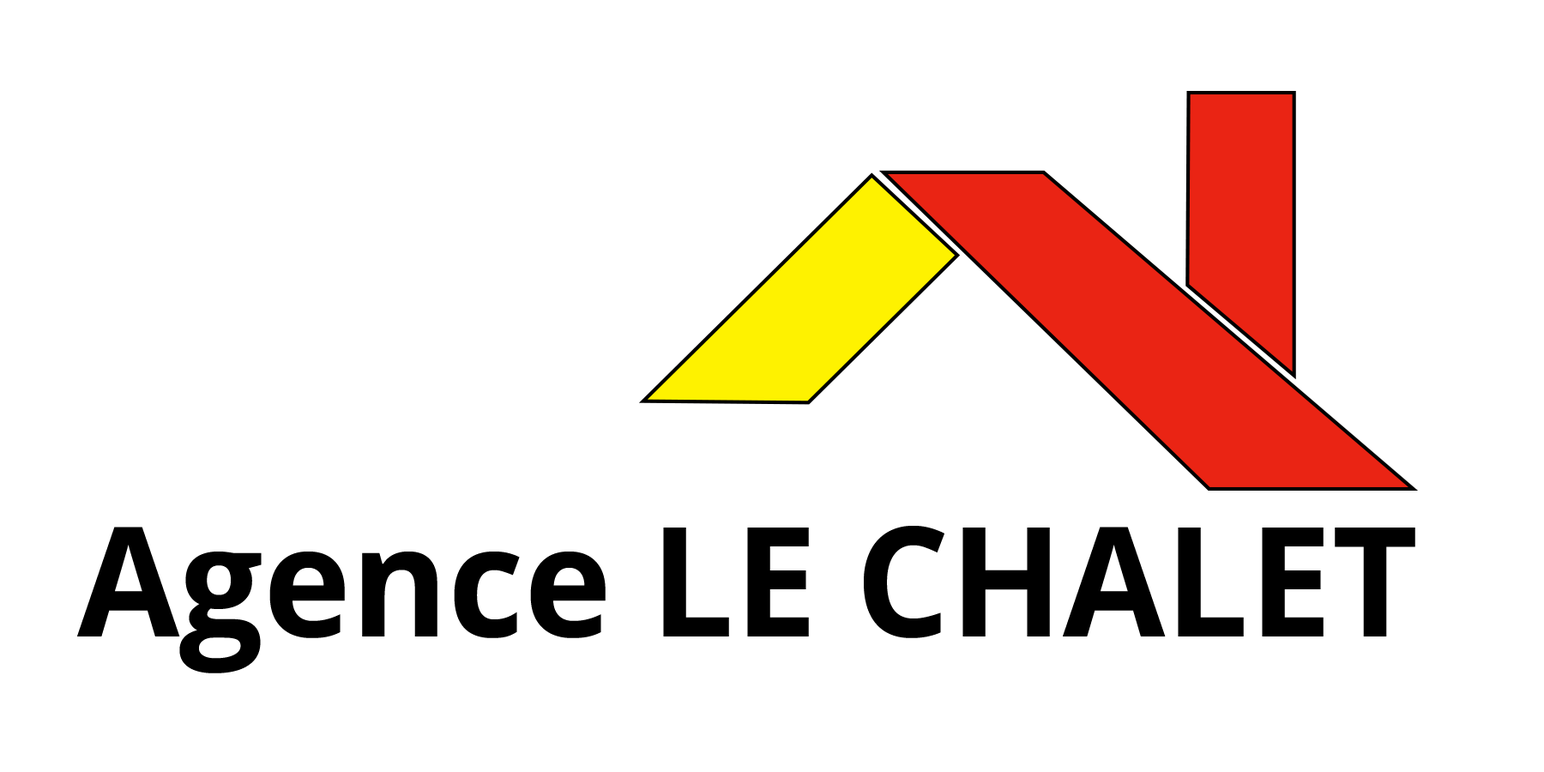
<style>
.page{position:relative;width:1544px;height:772px;background:#ffffff}
.page>*{position:absolute;margin:0}
.t1{font:152.6px "OpenSans-Bold";color:#000000}
</style>
<div class="page">
<p class="t1" style="left:77px;top:526px;width:1339px;height:147px">Agence LE CHALET</p>
</div>
